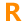
<style>
.page{position:relative;width:24px;height:24px;background:#ffffff}
.page>*{position:absolute;margin:0}
.t1{font:26px "LaoUI-Bold";color:#ff8a00}
</style>
<div class="page">
<p class="t1" style="left:6px;top:2px;width:16px;height:19px">R</p>
</div>
